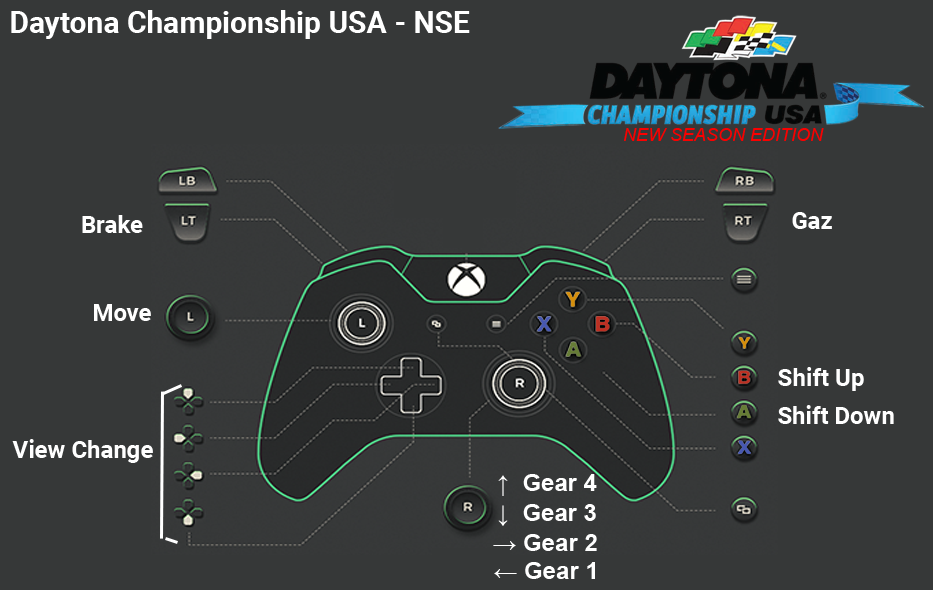
<style>
.page{position:relative;width:933px;height:590px;background:#363838}
.page>*{position:absolute;margin:0}
.t1{font:30px "Roboto-Bold";color:#ffffff}
.t2{font:18px "Arial-ItalicMT";color:#fb0000}
.t3{font:24px "Roboto-Bold";color:#ffffff}
.t4{font:24px "Arial-BoldMT";color:#ffffff}
</style>
<div class="page">
<p class="t1" style="left:11px;top:10px;width:459px;height:29px">Daytona Championship USA - NSE</p>
<p class="t2" style="left:624px;top:128px;width:200px;height:13px">NEW SEASON EDITION</p>
<p class="t3" style="left:82px;top:215px;width:61px;height:18px">Brake</p>
<p class="t3" style="left:792px;top:212px;width:40px;height:17px">Gaz</p>
<p class="t3" style="left:94px;top:304px;width:57px;height:17px">Move</p>
<p class="t3" style="left:778px;top:367px;width:86px;height:24px">Shift Up</p>
<p class="t3" style="left:778px;top:405px;width:116px;height:19px">Shift Down</p>
<p class="t3" style="left:12px;top:439px;width:141px;height:24px">View Change</p>
<p class="t4" style="left:498px;top:474px;width:99px;height:22px">↑  Gear 4</p>
<p class="t4" style="left:498px;top:504px;width:98px;height:22px">↓  Gear 3</p>
<p class="t4" style="left:493px;top:534px;width:104px;height:17px">→ Gear 2</p>
<p class="t4" style="left:494px;top:562px;width:101px;height:17px">← Gear 1</p>
</div>
